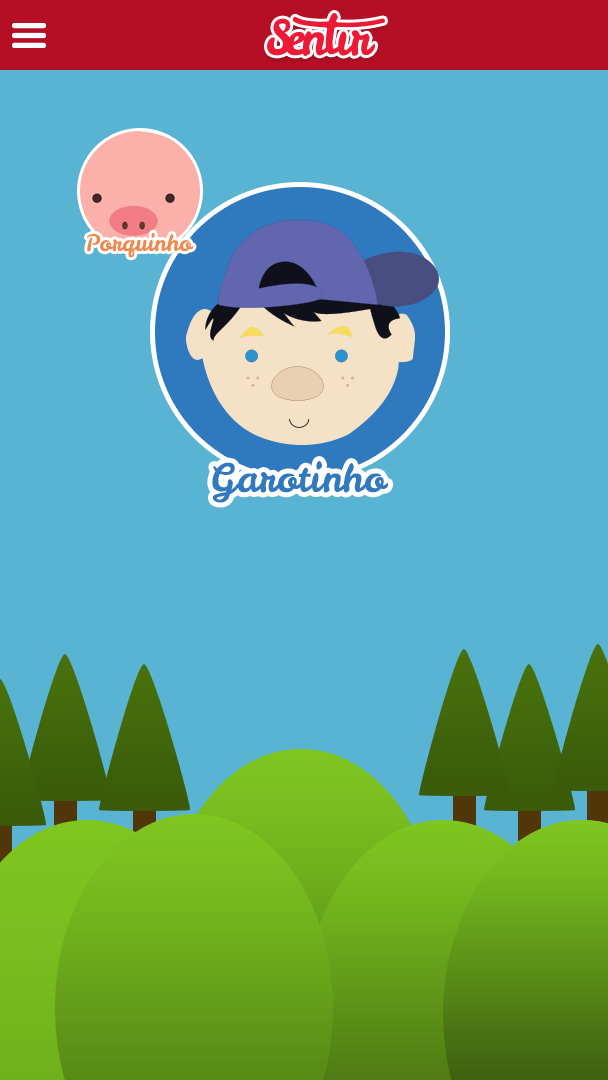
<style>
.page{position:relative;width:608px;height:1080px;background:#59b4d3}
.page>*{position:absolute;margin:0}
.t1{font:22.9px "LeckerliOne-Regular";color:#f08849}
.t2{font:38.8px "LeckerliOne-Regular";color:#2f7abe}
</style>
<div class="page">
<p class="t1" style="left:86px;top:232px;width:108px;height:26px">Porquinho</p>
<p class="t2" style="left:212px;top:461px;width:177px;height:42px">Garotinho</p>
</div>
